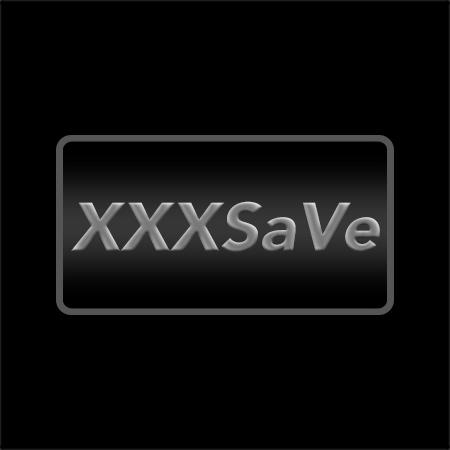
<style>
.page{position:relative;width:450px;height:450px;background:#000000}
.page>*{position:absolute;margin:0}
.t1{font:67.9px "Avenir-BlackOblique";letter-spacing:0.005em}
</style>
<div class="page">
<p class="t1" style="left:71px;top:201px;width:309px;height:52px">XXXSaVe</p>
</div>
